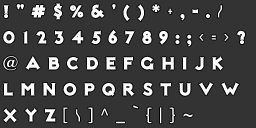
<style>
.page{position:relative;width:256px;height:128px;background:#333333}
.page>*{position:absolute;margin:0}
.t1{font:18px/26px "NotMaryKate";letter-spacing:0.4em;color:#ffffff}
.t2{font:18px/26px "Steamwreck";letter-spacing:0.4em;color:#ffffff}
.t3{font:18px/26px "ArialMT";letter-spacing:0.4em;color:#ffffff}
</style>
<div class="page">
<p class="t1" style="left:3px;top:3px;width:242px;height:121px">!"#$%&amp;'()*<span class="t2">+</span>,-.<span class="t2">/<br></span>0123456789:;<span class="t2">&lt;=&gt;</span>?<br>@ABCDEFGHIJK<br>LMNOPQRSTUVW<br>XYZ<span class="t2">[\]</span><span class="t3">^</span>_`<span class="t2">{|}</span><span class="t3">~</span></p>
</div>
